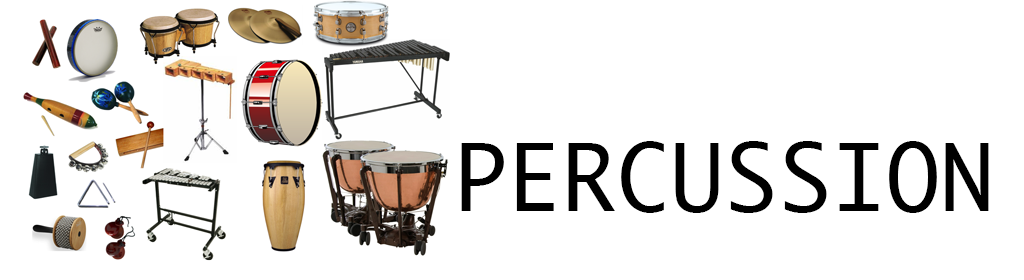
<style>
.page{position:relative;width:1024px;height:280px;background:#ffffff}
.page>*{position:absolute;margin:0}
.t1{font:90px "Ayuthaya";color:#000000}
</style>
<div class="page">
<p class="t1" style="left:461px;top:141px;width:528px;height:72px">PERCUSSION</p>
</div>
